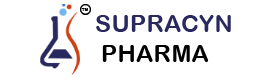
<style>
.page{position:relative;width:268px;height:78px;background:#ffffff}
.page>*{position:absolute;margin:0}
.t1{font:4.4px "ArialRoundedMTBold";color:#000000;text-transform:uppercase}
.t2{font:24.5px/30.2px "ArialRoundedMTBold";color:#29295f}
.t3{font:24.5px/30.2px "ArialRoundedMTBold";color:#000000}
</style>
<div class="page">
<p class="t1" style="left:81px;top:8px;width:7px;height:3px">TM</p>
<p class="t2" style="left:96px;top:15px;width:135px;height:47px">SUPRACYN<br> <span class="t3">PHARMA</span></p>
</div>
